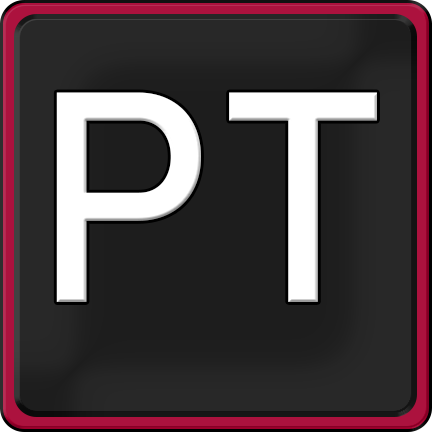
<style>
.page{position:relative;width:432px;height:432px;background:#1d1d1d}
.page>*{position:absolute;margin:0}
.t1{font:294.8px "Bahnschrift";color:#ffffff}
</style>
<div class="page">
<p class="t1" style="left:56px;top:92px;width:321px;height:210px">PT</p>
</div>
